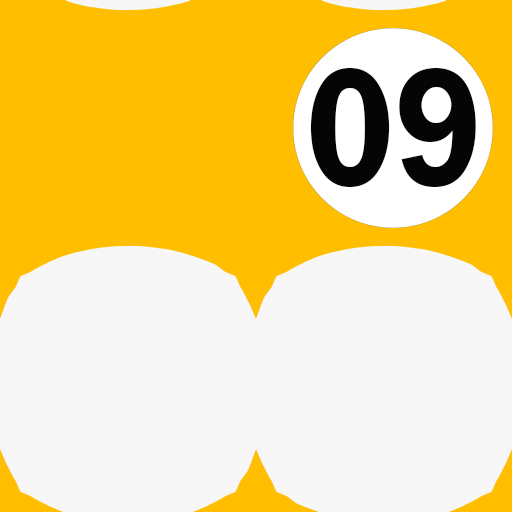
<style>
.page{position:relative;width:512px;height:512px;background:#f7f7f7}
.page>*{position:absolute;margin:0}
.t1{font:172.5px "FranklinGothic-Demi";color:#060505;scale:0.87 1}
</style>
<div class="page">
<p class="t1" style="left:310px;top:68px;width:166px;height:119px">09</p>
</div>
